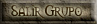
<style>
.page{position:relative;width:97px;height:24px}
.page>*{position:absolute;margin:0}
.t1{font:14.7px "Morpheus"}
</style>
<div class="page">
<p class="t1" style="left:11px;top:5px;width:72px;height:13px">Salir Grupo</p>
</div>
